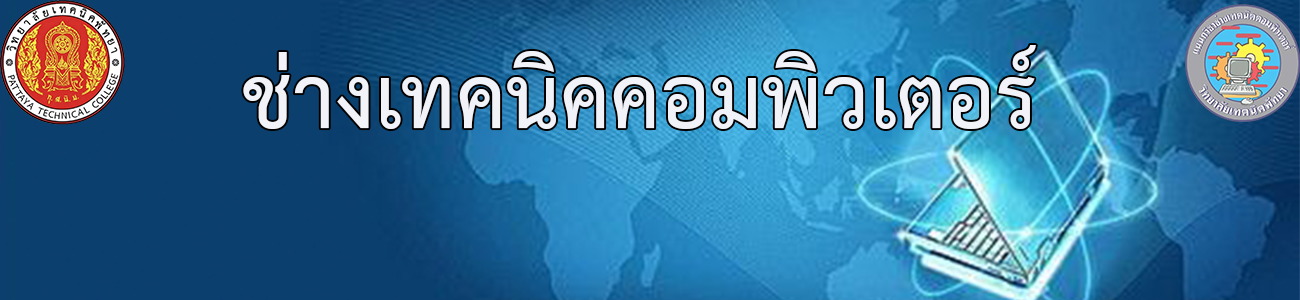
<style>
.page{position:relative;width:1300px;height:300px}
.page>*{position:absolute;margin:0}
.t1{font:125px "THSarabunNew-Bold";color:#f1f3f9}
</style>
<div class="page">
<p class="t1" style="left:243px;top:45px;width:793px;height:84px">ช่างเทคนิคคอมพิวเตอร์</p>
</div>
